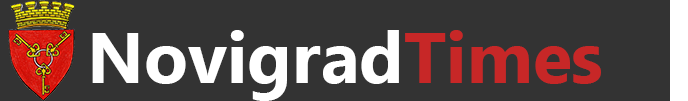
<style>
.page{position:relative;width:688px;height:101px;background:#333333}
.page>*{position:absolute;margin:0}
.t1{font:72px "Ebrima-Bold";color:#ffffff}
.t2{font:72px "Ebrima-Bold";color:#c72727}
</style>
<div class="page">
<p class="t1" style="left:92px;top:30px;width:509px;height:71px">Novigrad<span class="t2">Times</span></p>
</div>
